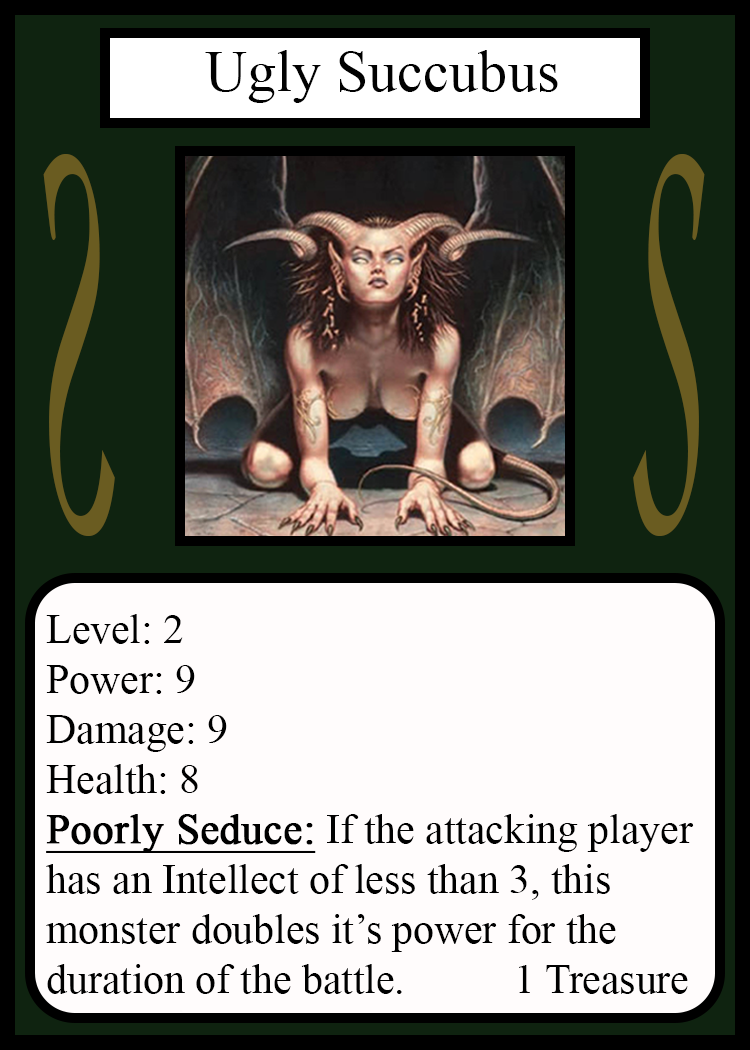
<style>
.page{position:relative;width:750px;height:1050px;background:#fffcfc}
.page>*{position:absolute;margin:0}
.t1{font:58.3px "TimesNewRomanPSMT";color:#010101}
.t2{font:548.5px "Apple-Chancery";color:#6a5c21;scale:0.27 1}
.t3{font:548.2px "Apple-Chancery";color:#6a5c21;scale:0.27 1}
.t4{font:41.7px "TimesNewRomanPSMT";color:#000000}
.t5{font:41.7px "TimesNewRomanPSMT";color:#000000;font-weight:bold;text-decoration:underline}
</style>
<div class="page">
<p class="t1" style="left:205px;top:50px;width:353px;height:53px">Ugly Succubus</p>
<p class="t2" style="left:43px;top:154px;width:72px;height:382px;rotate:180deg">S</p>
<p class="t3" style="left:633px;top:154px;width:72px;height:382px">S</p>
<p class="t4" style="left:46px;top:614px;width:648px;height:380px">Level: 2<br>Power: 9<br>Damage: 9<br>Health: 8<br><span class="t5">Poorly Seduce:</span> If the attacking player<br>has an Intellect of less than 3, this<br>monster doubles it’s power for the<br>duration of the battle.    1 Treasure</p>
</div>
